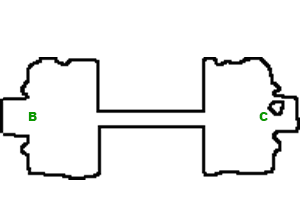
<style>
.page{position:relative;width:300px;height:224px;background:#ffffff}
.page>*{position:absolute;margin:0}
.t1{font:12px "Arial-Black";color:#0c9801}
</style>
<div class="page">
<p class="t1" style="left:28px;top:112px;width:9px;height:9px">B</p>
<p class="t1" style="left:259px;top:112px;width:9px;height:9px">C</p>
</div>
